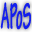
<style>
.page{position:relative;width:32px;height:32px}
.page>*{position:absolute;margin:0}
.t1{font:39.2px "TektonPro-BoldCond";color:#141fed;scale:0.45 1}
</style>
<div class="page">
<p class="t1" style="left:0px;top:2px;width:31px;height:28px">APoS</p>
</div>
